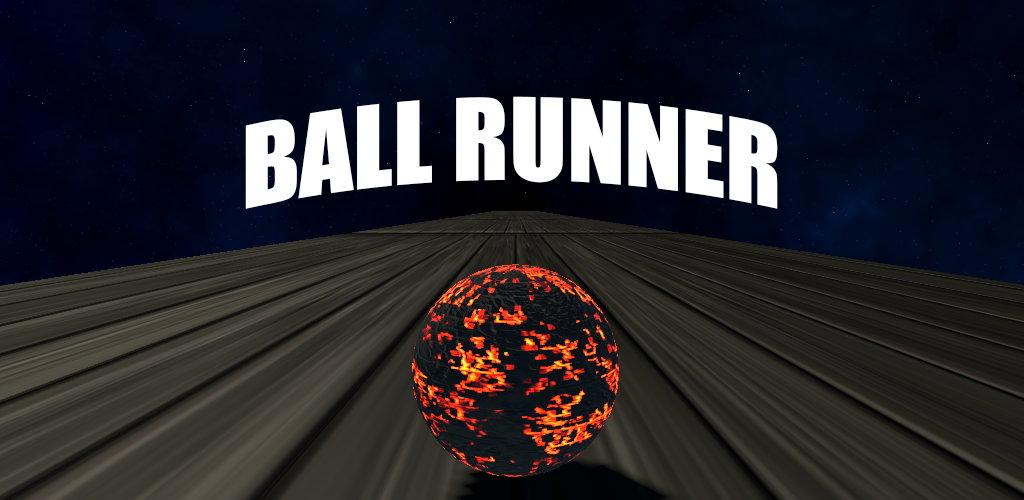
<style>
.page{position:relative;width:1024px;height:500px}
.page>*{position:absolute;margin:0}
.t1{font:104.6px "Impact";color:#ffffff}
</style>
<div class="page">
<p class="t1" style="left:245px;top:96px;width:533px;height:113px">BALL RUNNER</p>
</div>
